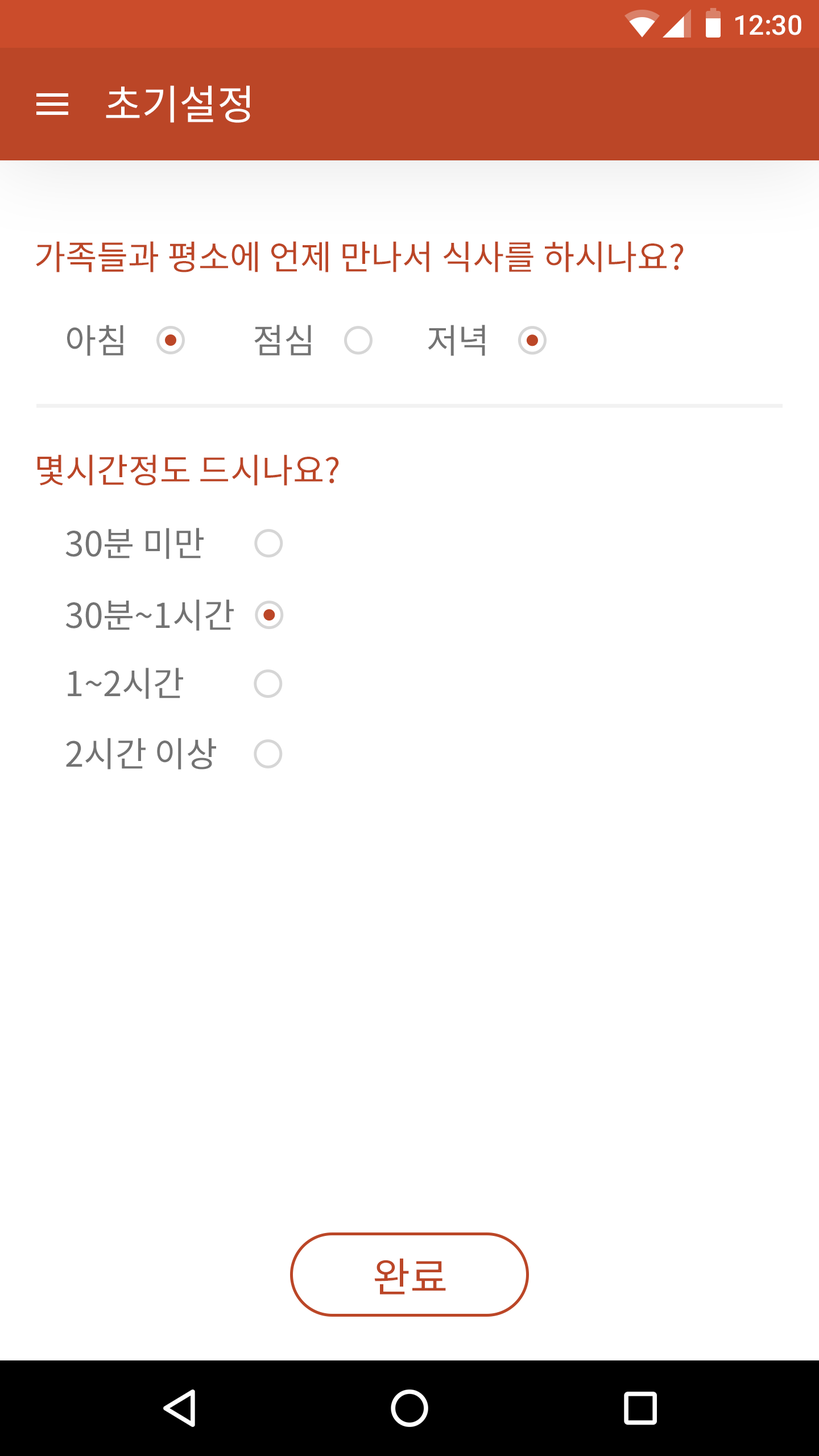
<style>
.page{position:relative;width:819px;height:1456px;background:#ffffff}
.page>*{position:absolute;margin:0}
.t1{font:27.3px "Roboto-Medium";color:#ffffff}
.t2{font:40.9px "NotoSansCJKkr-Regular";color:#ffffff}
.t3{font:34.1px "NotoSansCJKkr-Regular";color:#bb4627}
.t4{font:34.1px "NotoSansCJKkr-Regular";color:#737373}
.t5{font:34.3px "NotoSansCJKkr-Regular";color:#737373}
.t6{font:34.4px "NotoSansCJKkr-Regular";color:#737373}
.t7{font:34.7px "NotoSansCJKkr-Regular";color:#737373}
.t8{font:40.9px "NotoSansCJKkr-Regular";color:#bb4627}
</style>
<div class="page">
<p class="t1" style="left:735px;top:15px;width:66px;height:20px">12:30</p>
<p class="t2" style="left:106px;top:85px;width:144px;height:38px">초기설정</p>
<p class="t3" style="left:36px;top:241px;width:648px;height:31px">가족들과 평소에 언제 만나서 식사를 하시나요?</p>
<p class="t4" style="left:67px;top:325px;width:56px;height:31px">아침</p>
<p class="t5" style="left:254px;top:325px;width:57px;height:30px">점심</p>
<p class="t5" style="left:428px;top:325px;width:57px;height:31px">저녁</p>
<p class="t3" style="left:37px;top:454px;width:302px;height:32px">몇시간정도 드시나요?</p>
<p class="t5" style="left:65px;top:528px;width:139px;height:31px">30분 미만</p>
<p class="t6" style="left:65px;top:599px;width:169px;height:32px">30분~1시간</p>
<p class="t6" style="left:68px;top:668px;width:115px;height:31px">1~2시간</p>
<p class="t7" style="left:66px;top:738px;width:150px;height:32px">2시간 이상</p>
<p class="t8" style="left:374px;top:1258px;width:72px;height:36px">완료</p>
</div>
